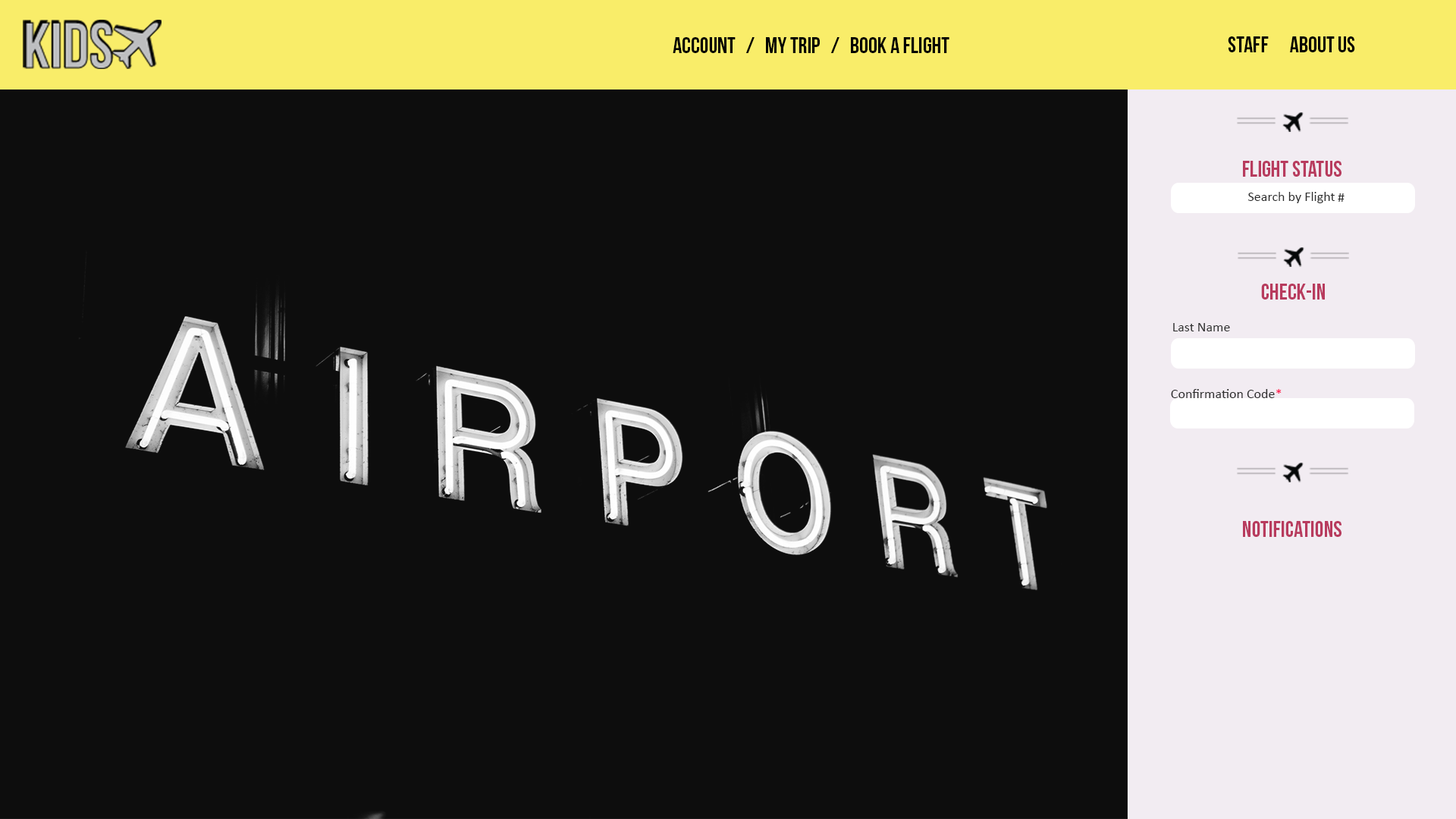
<style>
.page{position:relative;width:1456px;height:819px;background:#0d0d0d}
.page>*{position:absolute;margin:0}
.t1{font:22.7px "BebasNeue";color:#020202}
.t2{font:22.7px "BebasNeue";color:#b83b5e}
.t3{font:13.6px "Calibri";color:#2d2d2d}
.t4{font:13.6px "Calibri"}
</style>
<div class="page">
<p class="t1" style="left:673px;top:37px;width:276px;height:16px">Account   /   my trip   /   book a flight</p>
<p class="t1" style="left:1228px;top:36px;width:127px;height:16px">staff      About us</p>
<p class="t2" style="left:1243px;top:161px;width:98px;height:16px">FLight Status</p>
<p class="t3" style="left:1248px;top:192px;width:87px;height:11px">Search by Flight</p>
<p class="t3" style="left:1338px;top:193px;width:7px;height:9px">#</p>
<p class="t2" style="left:1261px;top:284px;width:64px;height:16px">Check-in</p>
<p class="t3" style="left:1173px;top:323px;width:57px;height:8px">Last Name</p>
<p class="t3" style="left:1171px;top:389px;width:104px;height:9px">Confirmation Code</p>
<p class="t4" style="left:1276px;top:389px;width:6px;height:5px">*</p>
<p class="t2" style="left:1243px;top:521px;width:98px;height:16px">notifications</p>
</div>
